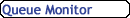
<style>
.page{position:relative;width:130px;height:18px;background:#ffffff}
.page>*{position:absolute;margin:0}
.t1{font:13px "TrebuchetMS";color:#334597;font-weight:bold}
</style>
<div class="page">
<p class="t1" style="left:2px;top:4px;width:91px;height:13px">Queue Monitor</p>
</div>
